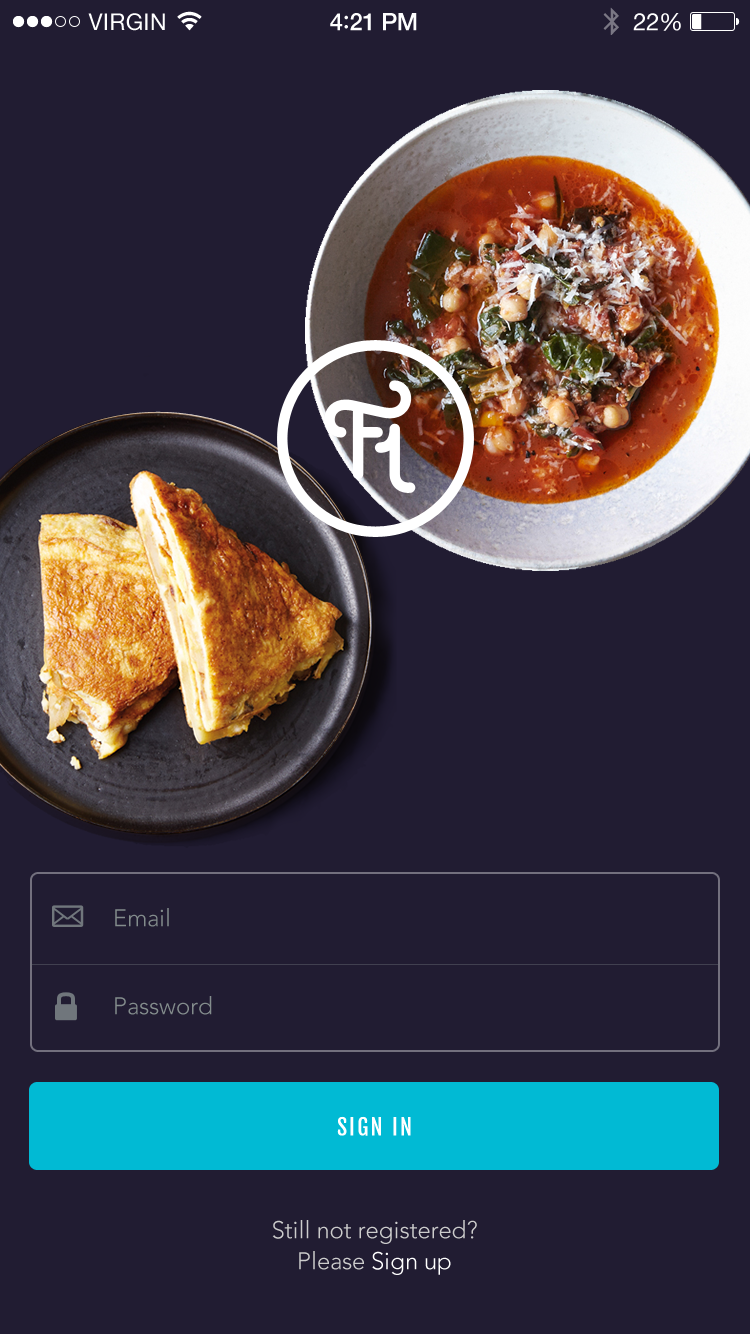
<style>
.page{position:relative;width:750px;height:1334px;background:#211c32}
.page>*{position:absolute;margin:0}
.t1{font:24px "Avenir-Light";color:#838c8c}
.t2{font:22px "FjallaOne-Regular";letter-spacing:0.1em;color:#ffffff}
.t3{font:24px/31.2px "Avenir-Light";color:#cccccc}
.t4{font:24px/31.2px "Avenir-Light";color:#ffffff}
</style>
<div class="page">
<p class="t1" style="left:115px;top:908px;width:54px;height:19px">Email</p>
<p class="t1" style="left:115px;top:996px;width:97px;height:19px">Password</p>
<p class="t2" style="left:337px;top:1116px;width:74px;height:20px">SIGN IN</p>
<p class="t3" style="left:272px;top:1220px;width:205px;height:55px;text-align:center">Still not registered?<br>Please <span class="t4">Sign up</span></p>
</div>
